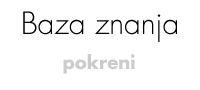
<style>
.page{position:relative;width:200px;height:90px;background:#ffffff}
.page>*{position:absolute;margin:0}
.t1{font:30px "FuturaCom-Light";color:#000000}
.t2{font:18px "FuturaCom-Bold";color:#cccccc}
</style>
<div class="page">
<p class="t1" style="left:23px;top:11px;width:154px;height:31px">Baza znanja</p>
<p class="t2" style="left:63px;top:54px;width:72px;height:20px">pokreni</p>
</div>
